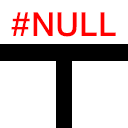
<style>
.page{position:relative;width:128px;height:128px;background:#ffffff}
.page>*{position:absolute;margin:0}
.t1{font:36px "Shruti-Bold";color:#ff0000}
</style>
<div class="page">
<p class="t1" style="left:11px;top:12px;width:105px;height:25px">#NULL</p>
</div>
